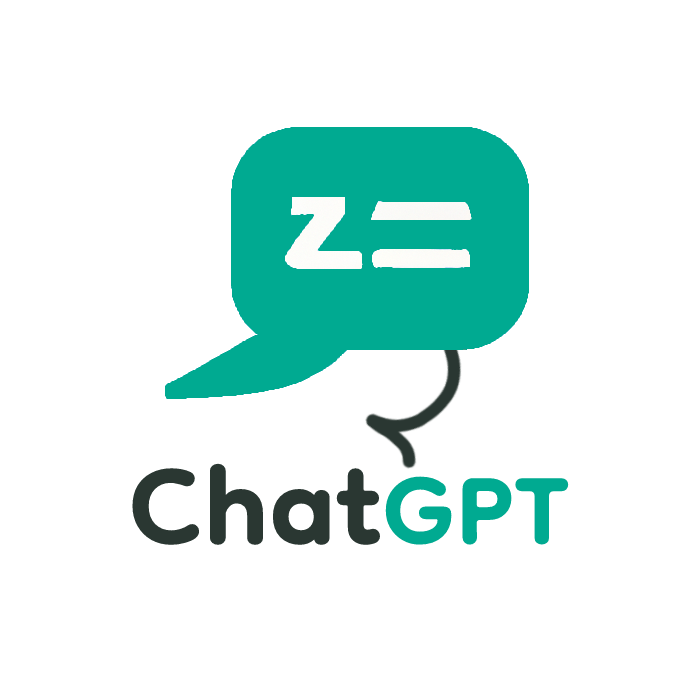
<style>
.page{position:relative;width:700px;height:700px;background:#ffffff}
.page>*{position:absolute;margin:0}
.t1{font:180px "Dongle-Bold";color:#2a3732}
.t2{font:160px "Dongle-Bold";color:#00aa91}
</style>
<div class="page">
<p class="t1" style="left:132px;top:463px;width:437px;height:82px">Chat<span class="t2">GPT</span></p>
</div>
